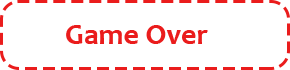
<style>
.page{position:relative;width:290px;height:70px;background:#ffffff}
.page>*{position:absolute;margin:0}
.t1{font:30px "Candara-Bold";color:#ea1c1c}
</style>
<div class="page">
<p class="t1" style="left:66px;top:25px;width:142px;height:19px">Game Over</p>
</div>
